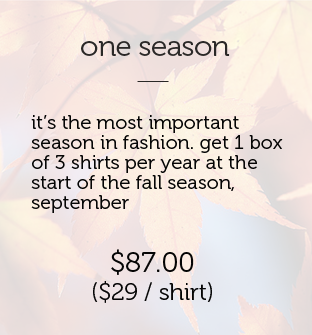
<style>
.page{position:relative;width:312px;height:335px}
.page>*{position:absolute;margin:0}
.t1{font:30px "Museo-300";letter-spacing:-0.025em;color:#2a2827}
.t2{font:20px/20px "Museo-300";color:#050505}
.t3{font:24px "Museo-300";color:#050505}
.t4{font:28px "Museo-300";color:#050505}
</style>
<div class="page">
<p class="t1" style="left:81px;top:41px;width:149px;height:15px">one season</p>
<p class="t2" style="left:31px;top:115px;width:252px;height:98px">it’s the most important season in fashion. get 1 box of 3 shirts per year at the start of the fall season,    september</p>
<p class="t3" style="left:93px;top:249px;width:119px;height:54px;text-align:center"><span class="t4">$87.00<br></span>($29 / shirt)</p>
</div>
